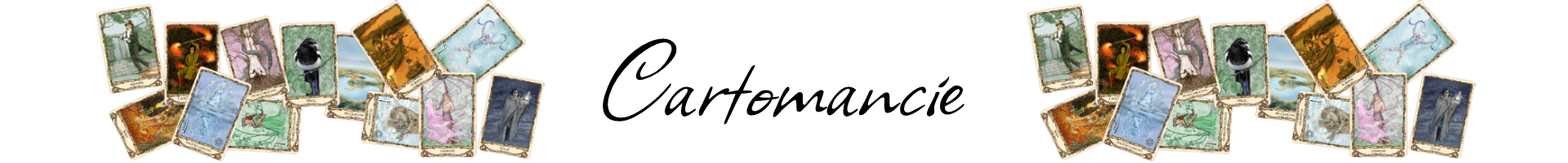
<style>
.page{position:relative;width:1568px;height:163px;background:#ffffff}
.page>*{position:absolute;margin:0}
.t1{font:118.4px "Allison-Regular";color:#000000}
</style>
<div class="page">
<p class="t1" style="left:603px;top:38px;width:362px;height:87px">Cartomancie</p>
</div>
